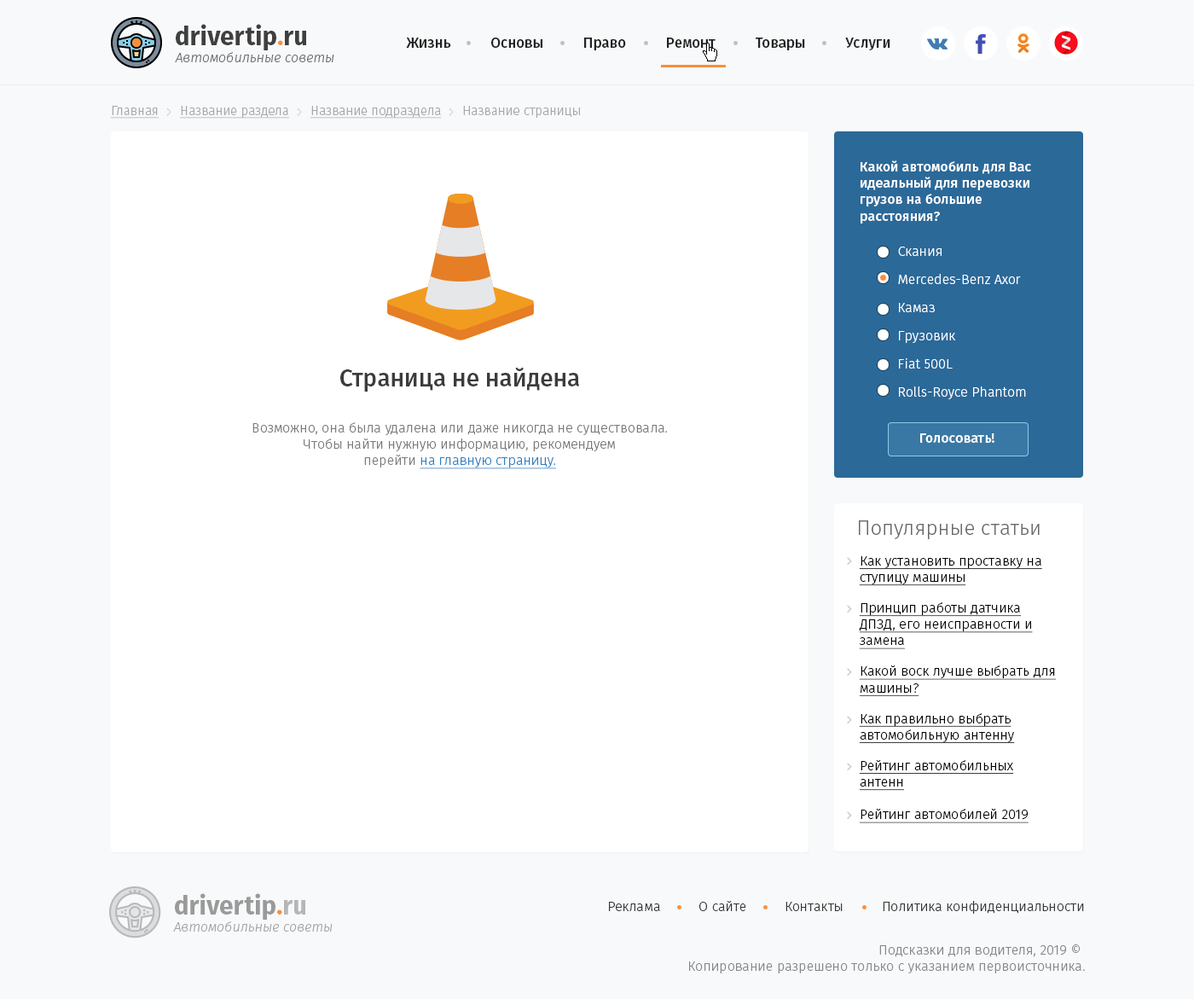
<style>
.page{position:relative;width:1194px;height:999px;background:#ffffff}
.page>*{position:absolute;margin:0}
.t1{font:25.6px "FiraSans-Bold";color:#3f3f3f}
.t2{font:25.6px "FiraSans-Bold";color:#f98e3c}
.t3{font:14.5px "FiraSans-Medium";color:#222222}
.t4{font:13.6px "FiraSans-LightItalic";color:#6f6f6f}
.t5{font:12.8px "FiraSans-Light";color:#a8a8a8;text-decoration:underline}
.t6{font:12.8px "FiraSans-Light";color:#a8a8a8}
.t7{font:13.6px "FiraSans-Medium";color:#ffffff}
.t8{font:13.6px/28.1px "FiraSans-Light";color:#ffffff}
.t9{font:13.6px/38.4px "FiraSans-Light";color:#ffffff}
.t10{font:23.9px "FiraSans-Medium";color:#3c3c3c}
.t11{font:13.6px "FiraSans-Light";color:#7a7a7a}
.t12{font:13.6px "FiraSans-Light";color:#2c80c0;text-decoration:underline}
.t13{font:20.5px "FiraSans-Light";color:#6a6a6a}
.t14{font:13.6px "FiraSans-Light";color:#000000;text-decoration:underline}
.t15{font:13.6px/30.7px "FiraSans-Light";color:#000000;text-decoration:underline}
.t16{font:25.6px "FiraSans-Bold";color:#9a9a9a}
.t17{font:25.6px "FiraSans-Bold";color:#b6b6b7}
.t18{font:13.6px "FiraSans-Light";color:#353535}
.t19{font:13.6px "FiraSans-LightItalic";color:#a7a7a7}
.t20{font:13.6px "FiraSans-Light";color:#878787}
</style>
<div class="page">
<p class="t1" style="left:176px;top:24px;width:130px;height:26px">drivertip<span class="t2">.</span>ru</p>
<p class="t3" style="left:406px;top:38px;width:484px;height:12px">Жизнь           Основы           Право           Ремонт           Товары           Услуги</p>
<p class="t4" style="left:175px;top:52px;width:159px;height:10px">Автомобильные советы</p>
<p class="t5" style="left:111px;top:106px;width:469px;height:13px">Главная      Название раздела      Название подраздела<span class="t6">      Название страницы</span></p>
<p class="t7" style="left:861px;top:160px;width:170px;height:63px">Какой автомобиль для Вас идеальный для перевозки грузов на большие расстояния?</p>
<p class="t8" style="left:898px;top:246px;width:128px;height:153px"><span class="t9">Скания<br></span>Mercedes-Benz Axor<br>Камаз<br>Грузовик<br>Fiat 500L<br>Rolls-Royce Phantom</p>
<p class="t10" style="left:340px;top:367px;width:239px;height:24px">Страница не найдена</p>
<p class="t11" style="left:252px;top:422px;width:415px;height:47px;text-align:center">Возможно, она была удалена или даже никогда не существовала. <br>Чтобы найти нужную информацию, рекомендуем <br>перейти <span class="t12">на главную страницу.</span></p>
<p class="t7" style="left:920px;top:433px;width:74px;height:10px">Голосовать!</p>
<p class="t13" style="left:859px;top:520px;width:181px;height:19px">Популярные статьи</p>
<p class="t14" style="left:859px;top:556px;width:198px;height:267px"><span class="t15">Как установить проставку на </span>ступицу машины<br><span class="t15">Принцип работы датчика </span>ДПЗД, его неисправности и замена<br><span class="t15">Какой воск лучше выбрать для </span>машины?<br><span class="t15">Как правильно выбрать </span>автомобильную антенну<br><span class="t15">Рейтинг автомобильных </span>антенн<br><br>Рейтинг автомобилей 2019</p>
<p class="t16" style="left:175px;top:893px;width:130px;height:26px">drivertip<span class="t2">.</span><span class="t17">ru</span></p>
<p class="t18" style="left:609px;top:900px;width:475px;height:13px">Реклама          О сайте          Контакты          Политика конфиденциальности</p>
<p class="t19" style="left:173px;top:921px;width:160px;height:10px">Автомобильные советы</p>
<p class="t20" style="left:689px;top:944px;width:396px;height:29px;text-align:right">Подсказки для водителя, 2019 © <br>Копирование разрешено только с указанием первоисточника.</p>
</div>
